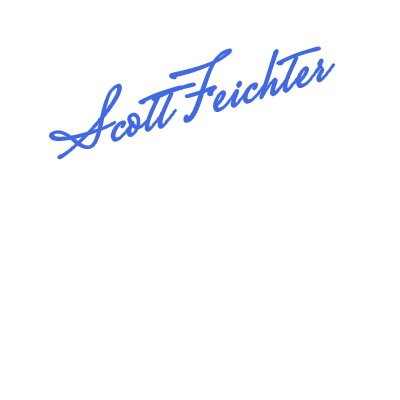
<style>
.page{position:relative;width:400px;height:400px;background:#ffffff}
.page>*{position:absolute;margin:0}
.t1{font:72px "MrsSaintDelafield-Regular";color:#4169e1}
</style>
<div class="page">
<p class="t1" style="left:50px;top:47px;width:285px;height:112px;rotate:-16deg">Scott Feichter</p>
</div>
